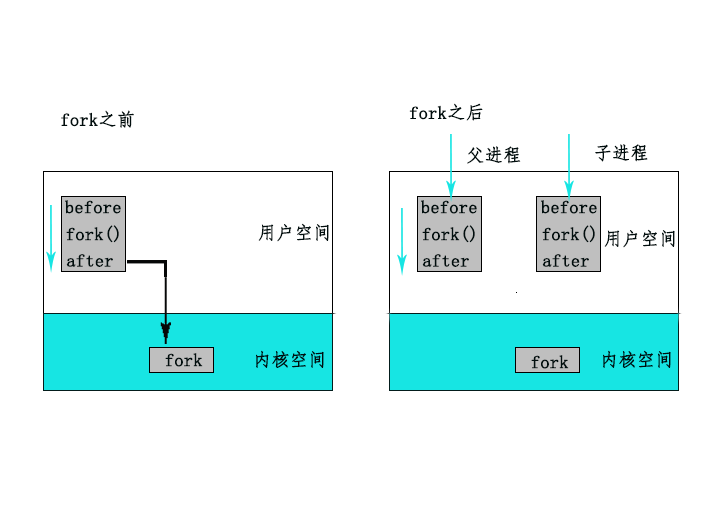
<style>
.page{position:relative;width:709px;height:510px;background:#ffffff}
.page>*{position:absolute;margin:0}
.t1{font:18px "FangSong";color:#010e0e;font-weight:bold}
</style>
<div class="page">
<p class="t1" style="left:61px;top:110px;width:73px;height:18px">fork之前</p>
<p class="t1" style="left:409px;top:103px;width:74px;height:18px">fork之后</p>
<p class="t1" style="left:467px;top:146px;width:54px;height:18px">父进程</p>
<p class="t1" style="left:595px;top:144px;width:53px;height:18px">子进程</p>
<p class="t1" style="left:65px;top:200px;width:56px;height:14px">before</p>
<p class="t1" style="left:421px;top:200px;width:56px;height:14px">before</p>
<p class="t1" style="left:541px;top:200px;width:56px;height:14px">before</p>
<p class="t1" style="left:66px;top:225px;width:53px;height:18px">fork()</p>
<p class="t1" style="left:258px;top:223px;width:71px;height:19px">用户空间</p>
<p class="t1" style="left:422px;top:225px;width:53px;height:18px">fork()</p>
<p class="t1" style="left:542px;top:225px;width:53px;height:18px">fork()</p>
<p class="t1" style="left:604px;top:229px;width:71px;height:19px">用户空间</p>
<p class="t1" style="left:66px;top:254px;width:47px;height:13px">after</p>
<p class="t1" style="left:422px;top:254px;width:47px;height:13px">after</p>
<p class="t1" style="left:542px;top:254px;width:47px;height:13px">after</p>
<p class="t1" style="left:165px;top:353px;width:38px;height:14px">fork</p>
<p class="t1" style="left:256px;top:350px;width:68px;height:18px">内核空间</p>
<p class="t1" style="left:603px;top:350px;width:68px;height:18px">内核空间</p>
<p class="t1" style="left:531px;top:355px;width:38px;height:14px">fork</p>
</div>
